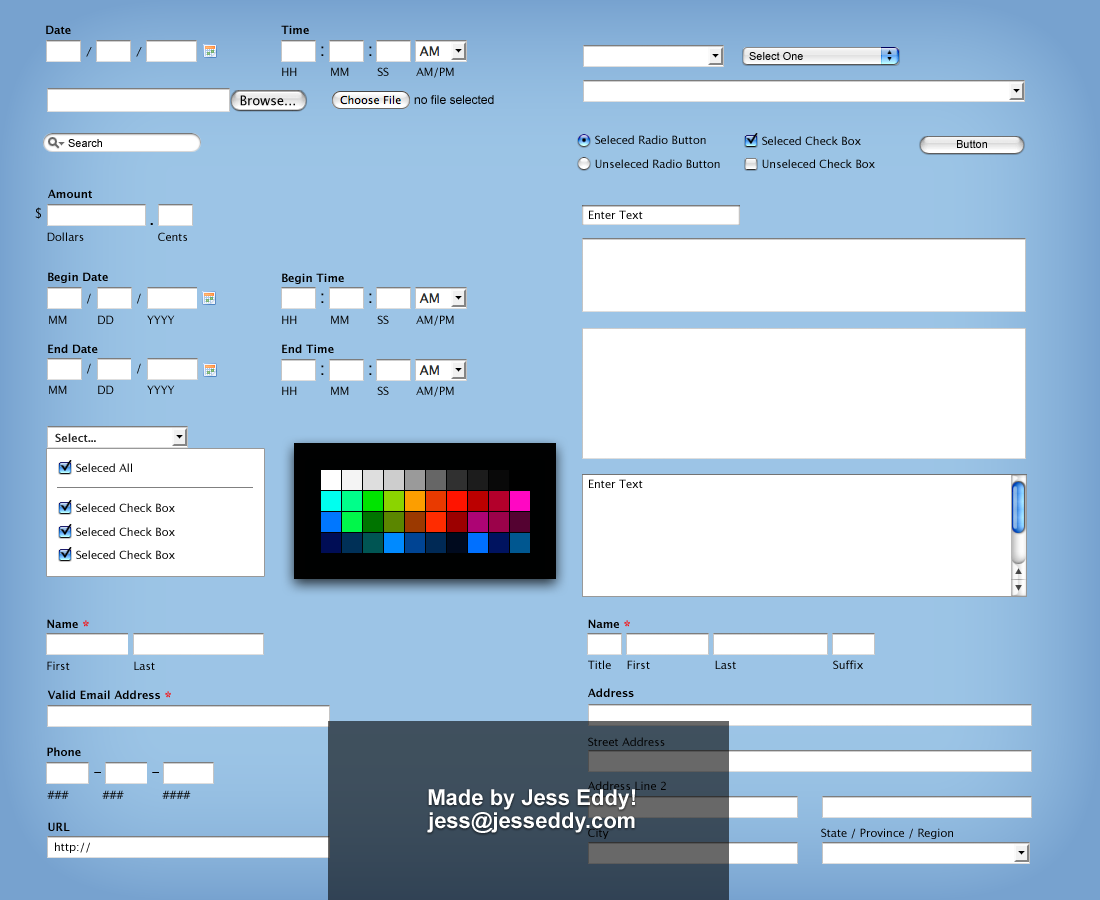
<style>
.page{position:relative;width:1100px;height:900px;background:#ffffff}
.page>*{position:absolute;margin:0}
.t1{font:11px "LucidaGrande-Bold";color:#000000}
.t2{font:11px "LucidaGrande";font-style:italic}
.t3{font:18px "LucidaGrande";color:#010101}
.t4{font:11px "ArialMT";color:#000000}
.t5{font:11px "LucidaGrande"}
.t6{font:11px "LucidaGrande";color:#000000}
.t7{font:13px "LucidaGrande";color:#000000}
.t8{font:12px "ArialMT";color:#010101}
.t9{font:11px "LucidaGrande-Bold";color:#010101}
.t10{font:13px "LucidaGrande";color:#010101}
.t11{font:11px "LucidaGrande";color:#010101}
.t12{font:17px "LucidaGrande";color:#010101}
.t13{font:11px "LucidaGrande-Bold";color:#292929}
.t14{font:16px "LucidaGrande-Bold";color:#ff0000}
.t15{font:15px "LucidaGrande";color:#010101}
.t16{font:22px/23px "Arial-BoldMT";color:#ffffff}
</style>
<div class="page">
<p class="t1" style="left:46px;top:25px;width:25px;height:9px">Date</p>
<p class="t1" style="left:281px;top:25px;width:28px;height:9px">Time</p>
<p class="t2" style="left:86px;top:47px;width:6px;height:10px">/</p>
<p class="t2" style="left:136px;top:47px;width:6px;height:10px">/</p>
<p class="t3" style="left:321px;top:46px;width:3px;height:10px">:</p>
<p class="t3" style="left:369px;top:46px;width:3px;height:10px">:</p>
<p class="t4" style="left:749px;top:52px;width:54px;height:8px">Select One</p>
<p class="t5" style="left:282px;top:67px;width:15px;height:9px">HH</p>
<p class="t6" style="left:331px;top:67px;width:18px;height:9px">MM</p>
<p class="t6" style="left:377px;top:67px;width:12px;height:9px">SS</p>
<p class="t6" style="left:416px;top:67px;width:38px;height:11px">AM/PM</p>
<p class="t7" style="left:240px;top:95px;width:55px;height:11px">Browse...</p>
<p class="t8" style="left:414px;top:95px;width:80px;height:9px">no file selected</p>
<p class="t6" style="left:595px;top:135px;width:111px;height:9px">Seleced Radio Button</p>
<p class="t6" style="left:762px;top:136px;width:99px;height:9px">Seleced Check Box</p>
<p class="t4" style="left:68px;top:139px;width:34px;height:8px">Search</p>
<p class="t4" style="left:957px;top:140px;width:30px;height:8px">Button</p>
<p class="t6" style="left:595px;top:159px;width:125px;height:9px">Unseleced Radio Button</p>
<p class="t6" style="left:762px;top:159px;width:113px;height:9px">Unseleced Check Box</p>
<p class="t9" style="left:48px;top:189px;width:44px;height:9px">Amount</p>
<p class="t10" style="left:35px;top:207px;width:6px;height:12px">$</p>
<p class="t6" style="left:589px;top:210px;width:54px;height:9px">Enter Text</p>
<p class="t11" style="left:47px;top:232px;width:37px;height:9px">Dollars</p>
<p class="t12" style="left:150px;top:223px;width:3px;height:2px">.</p>
<p class="t11" style="left:158px;top:232px;width:29px;height:9px">Cents</p>
<p class="t1" style="left:48px;top:272px;width:60px;height:11px">Begin Date</p>
<p class="t1" style="left:282px;top:273px;width:62px;height:11px">Begin Time</p>
<p class="t5" style="left:87px;top:293px;width:4px;height:11px">/</p>
<p class="t5" style="left:137px;top:293px;width:4px;height:11px">/</p>
<p class="t3" style="left:321px;top:293px;width:3px;height:10px">:</p>
<p class="t3" style="left:369px;top:293px;width:3px;height:10px">:</p>
<p class="t6" style="left:49px;top:315px;width:18px;height:9px">MM</p>
<p class="t6" style="left:98px;top:315px;width:16px;height:9px">DD</p>
<p class="t6" style="left:147px;top:315px;width:28px;height:9px">YYYY</p>
<p class="t5" style="left:282px;top:315px;width:15px;height:9px">HH</p>
<p class="t6" style="left:331px;top:315px;width:18px;height:9px">MM</p>
<p class="t6" style="left:377px;top:315px;width:12px;height:9px">SS</p>
<p class="t6" style="left:416px;top:315px;width:38px;height:11px">AM/PM</p>
<p class="t1" style="left:48px;top:344px;width:50px;height:9px">End Date</p>
<p class="t1" style="left:282px;top:344px;width:52px;height:9px">End Time</p>
<p class="t5" style="left:87px;top:363px;width:4px;height:11px">/</p>
<p class="t5" style="left:137px;top:363px;width:4px;height:11px">/</p>
<p class="t3" style="left:321px;top:365px;width:3px;height:10px">:</p>
<p class="t3" style="left:369px;top:365px;width:3px;height:10px">:</p>
<p class="t6" style="left:49px;top:385px;width:18px;height:9px">MM</p>
<p class="t6" style="left:98px;top:385px;width:16px;height:9px">DD</p>
<p class="t6" style="left:147px;top:385px;width:28px;height:9px">YYYY</p>
<p class="t5" style="left:282px;top:386px;width:15px;height:9px">HH</p>
<p class="t6" style="left:331px;top:386px;width:18px;height:9px">MM</p>
<p class="t6" style="left:377px;top:386px;width:12px;height:9px">SS</p>
<p class="t6" style="left:416px;top:386px;width:38px;height:11px">AM/PM</p>
<p class="t13" style="left:55px;top:433px;width:41px;height:9px">Select...</p>
<p class="t6" style="left:76px;top:463px;width:56px;height:9px">Seleced All</p>
<p class="t6" style="left:589px;top:479px;width:54px;height:9px">Enter Text</p>
<p class="t6" style="left:76px;top:503px;width:99px;height:9px">Seleced Check Box</p>
<p class="t6" style="left:76px;top:527px;width:99px;height:9px">Seleced Check Box</p>
<p class="t6" style="left:76px;top:550px;width:99px;height:9px">Seleced Check Box</p>
<p class="t9" style="left:47px;top:619px;width:42px;height:9px">Name <span class="t14">*<br>*</span></p>
<p class="t9" style="left:588px;top:619px;width:42px;height:9px">Name <span class="t14">*<br></span>*</p>
<p class="t11" style="left:47px;top:661px;width:23px;height:9px">First</p>
<p class="t11" style="left:134px;top:661px;width:21px;height:9px">Last</p>
<p class="t11" style="left:588px;top:660px;width:23px;height:9px">Title</p>
<p class="t11" style="left:627px;top:660px;width:23px;height:9px">First</p>
<p class="t5" style="left:715px;top:660px;width:21px;height:9px">Last</p>
<p class="t5" style="left:833px;top:660px;width:30px;height:9px">Suffix</p>
<p class="t9" style="left:588px;top:688px;width:46px;height:9px">Address</p>
<p class="t9" style="left:47px;top:690px;width:124px;height:9px">Valid Email Address <span class="t14">*</span></p>
<p class="t11" style="left:588px;top:737px;width:77px;height:9px">Street Address</p>
<p class="t9" style="left:47px;top:747px;width:34px;height:9px">Phone</p>
<p class="t15" style="left:94px;top:772px;width:7px;height:1px">-</p>
<p class="t15" style="left:152px;top:772px;width:7px;height:1px">-</p>
<p class="t11" style="left:587px;top:781px;width:79px;height:9px">Address Line 2</p>
<p class="t5" style="left:47px;top:790px;width:22px;height:9px">###</p>
<p class="t5" style="left:102px;top:790px;width:22px;height:9px">###</p>
<p class="t5" style="left:162px;top:790px;width:29px;height:9px">####</p>
<p class="t16" style="left:427px;top:789px;width:208px;height:44px;text-align:center">Made by Jess Eddy!<br>jess@jesseddy.com</p>
<p class="t9" style="left:48px;top:822px;width:22px;height:9px">URL</p>
<p class="t11" style="left:588px;top:828px;width:21px;height:11px">City</p>
<p class="t11" style="left:821px;top:828px;width:132px;height:11px">State / Province / Region</p>
<p class="t11" style="left:55px;top:842px;width:35px;height:11px">http://</p>
</div>
